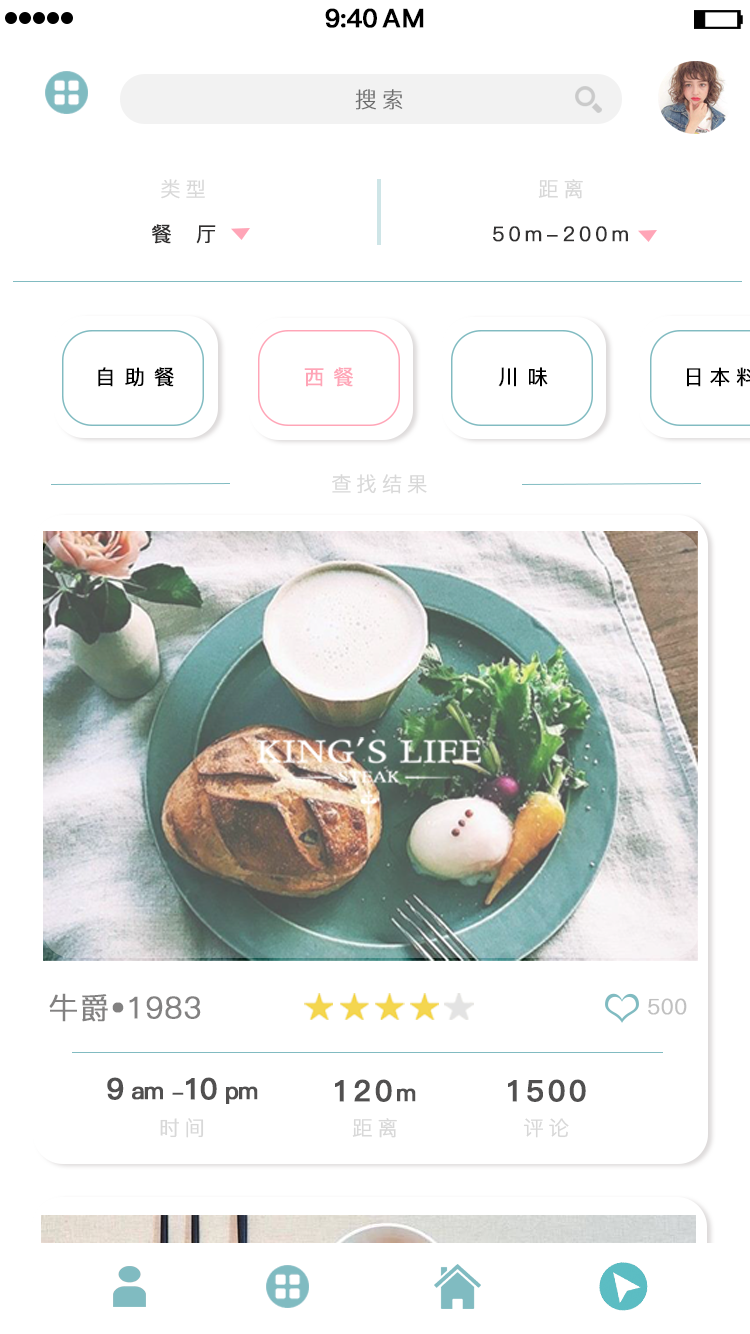
<style>
.page{position:relative;width:750px;height:1334px;background:#ffffff}
.page>*{position:absolute;margin:0}
.t1{font:25.4px "PingFang-SC-Bold";letter-spacing:-0.028em;color:#000000;font-weight:bold}
.t2{font:25.4px "PingFang-SC-Bold";letter-spacing:0.052em;color:#000000;font-weight:bold}
.t3{font:21.9px "PingFang-SC-Light";letter-spacing:0.212em;color:#6b6b6b;font-weight:bold}
.t4{font:20.4px "PingFang-SC-Regular";letter-spacing:0.212em;color:#d8d8d8;font-weight:bold}
.t5{font:20.4px "PingFang-SC-Medium";letter-spacing:1.172em;color:#302e2e;font-weight:bold}
.t6{font:20.4px "PingFang-SC-Medium";letter-spacing:0.172em;color:#323131;font-weight:bold}
.t7{font:20.4px "PingFang-SC-Medium";letter-spacing:0.412em;color:#000000;font-weight:bold}
.t8{font:20.4px "PingFang-SC-Medium";letter-spacing:0.412em;color:#ffa5b7;font-weight:bold}
.t9{font:29.8px "PingFang-SC-Regular";letter-spacing:0.012em;color:#828181;font-weight:bold}
.t10{font:21.1px "PingFang-SC-Regular";letter-spacing:0.012em;color:#c0c0c0;font-weight:bold}
.t11{font:23.4px "PingFang-SC-Bold";letter-spacing:-0.068em;color:#515050;font-weight:bold}
.t12{font:29.4px "PingFang-SC-Bold";letter-spacing:-0.068em;color:#515050;font-weight:bold}
.t13{font:20.4px "PingFang-SC-Bold";letter-spacing:-0.068em;color:#515050;font-weight:bold}
.t14{font:29.4px "PingFang-SC-Bold";letter-spacing:0.092em;color:#515050;font-weight:bold}
.t15{font:23.4px "PingFang-SC-Bold";letter-spacing:0.092em;color:#515050;font-weight:bold}
</style>
<div class="page">
<p class="t1" style="left:325px;top:8px;width:52px;height:20px">9:40</p>
<p class="t2" style="left:382px;top:8px;width:42px;height:20px">AM</p>
<p class="t3" style="left:355px;top:89px;width:48px;height:21px">搜索</p>
<p class="t4" style="left:161px;top:179px;width:44px;height:20px">类型</p>
<p class="t4" style="left:538px;top:179px;width:45px;height:20px">距离</p>
<p class="t5" style="left:152px;top:224px;width:64px;height:20px">餐厅</p>
<p class="t6" style="left:493px;top:226px;width:135px;height:16px">50m-200m</p>
<p class="t7" style="left:98px;top:367px;width:76px;height:20px">自助餐</p>
<p class="t8" style="left:304px;top:367px;width:49px;height:20px">西餐</p>
<p class="t7" style="left:498px;top:367px;width:50px;height:20px">川味</p>
<p class="t4" style="left:332px;top:474px;width:95px;height:20px">查找结果</p>
<p class="t9" style="left:49px;top:993px;width:152px;height:29px">牛爵•1983</p>
<p class="t10" style="left:648px;top:998px;width:39px;height:17px">500</p>
<p class="t11" style="left:107px;top:1077px;width:151px;height:27px"><span class="t12">9 </span>am <span class="t13">-</span><span class="t12">10 </span>pm</p>
<p class="t14" style="left:335px;top:1079px;width:81px;height:23px">120<span class="t15">m</span></p>
<p class="t14" style="left:508px;top:1079px;width:78px;height:23px">1500</p>
<p class="t4" style="left:160px;top:1118px;width:44px;height:20px">时间</p>
<p class="t4" style="left:352px;top:1118px;width:45px;height:20px">距离</p>
<p class="t4" style="left:523px;top:1118px;width:46px;height:20px">评论</p>
</div>
